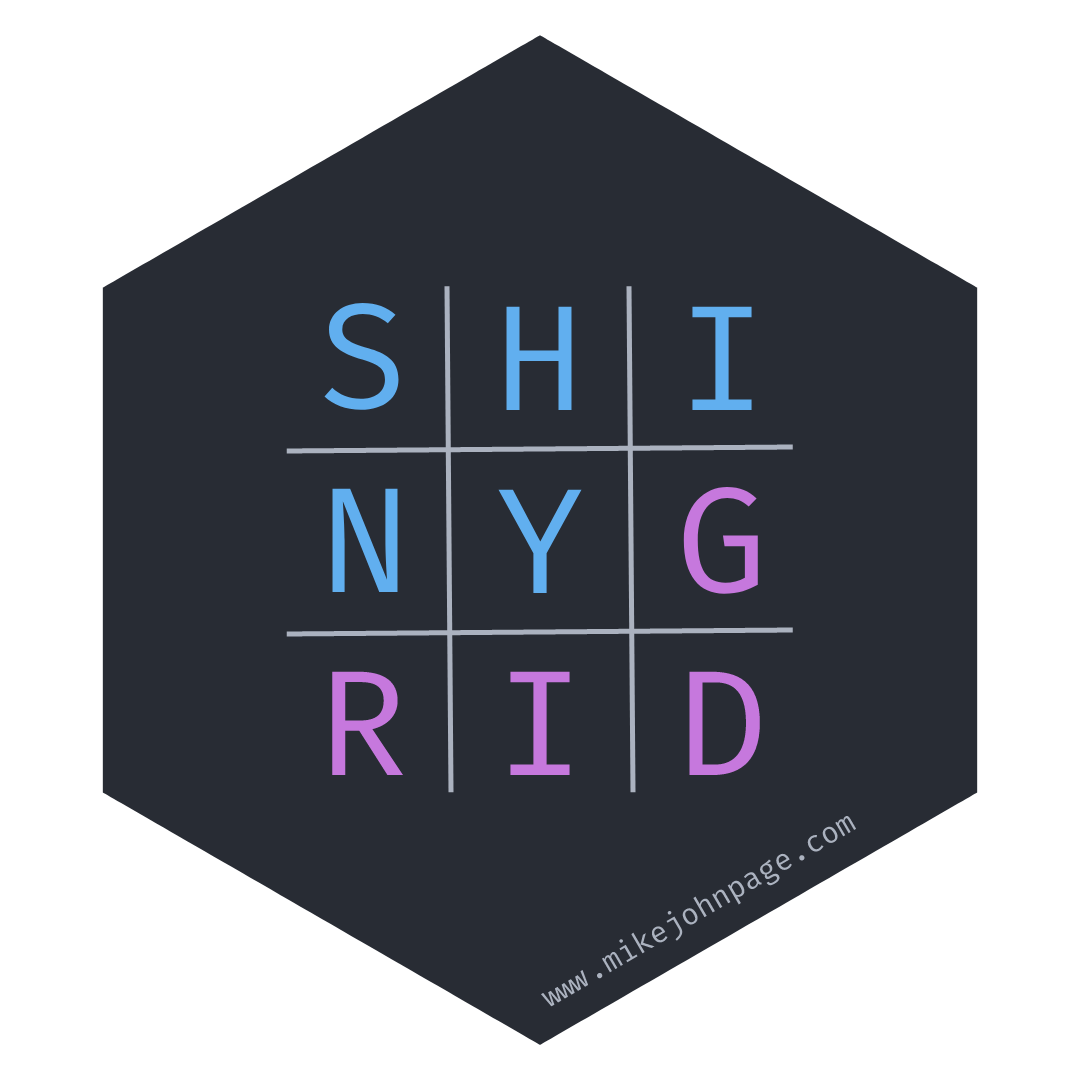
<style>
.page{position:relative;width:1080px;height:1080px;background:#282c34}
.page>*{position:absolute;margin:0}
.t1{font:150px "FiraCode-Regular";color:#61afef}
.t2{font:150px "FiraCode-Regular";color:#c678dd}
</style>
<div class="page">
<p class="t1" style="left:324px;top:303px;width:75px;height:107px">S</p>
<p class="t1" style="left:506px;top:306px;width:66px;height:104px">H</p>
<p class="t1" style="left:692px;top:306px;width:60px;height:104px">I</p>
<p class="t1" style="left:332px;top:488px;width:66px;height:104px">N</p>
<p class="t1" style="left:498px;top:489px;width:84px;height:104px">Y</p>
<p class="t2" style="left:683px;top:487px;width:75px;height:107px">G</p>
<p class="t2" style="left:332px;top:671px;width:72px;height:104px">R</p>
<p class="t2" style="left:510px;top:671px;width:60px;height:104px">I</p>
<p class="t2" style="left:689px;top:671px;width:71px;height:104px">D</p>
</div>
